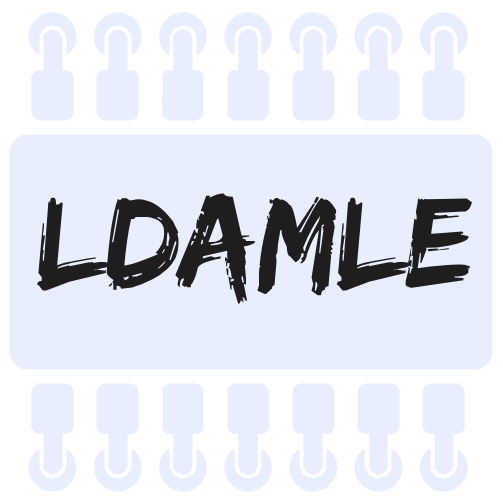
<style>
.page{position:relative;width:503px;height:503px;background:#e9eeff}
.page>*{position:absolute;margin:0}
.t1{font:133px "Edo";color:#1e1e1e}
</style>
<div class="page">
<p class="t1" style="left:37px;top:193px;width:435px;height:111px">LDAMLE</p>
</div>
